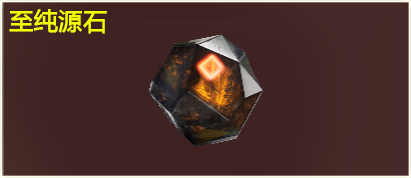
<style>
.page{position:relative;width:411px;height:178px}
.page>*{position:absolute;margin:0}
.t1{font:24px "MicrosoftYaHeiUI";color:#f4ff00;font-weight:bold}
</style>
<div class="page">
<p class="t1" style="left:9px;top:9px;width:98px;height:25px">至纯源石</p>
</div>
